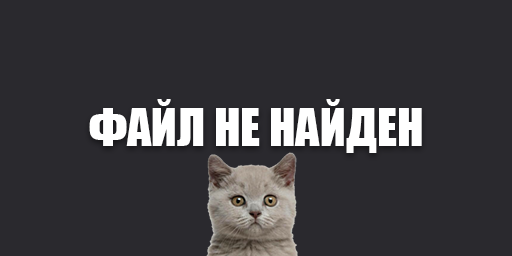
<style>
.page{position:relative;width:512px;height:256px;background:#2a292e}
.page>*{position:absolute;margin:0}
.t1{font:48px "Impact";color:#ffffff}
</style>
<div class="page">
<p class="t1" style="left:89px;top:99px;width:333px;height:54px">ФАЙЛ НЕ НАЙДЕН</p>
</div>
